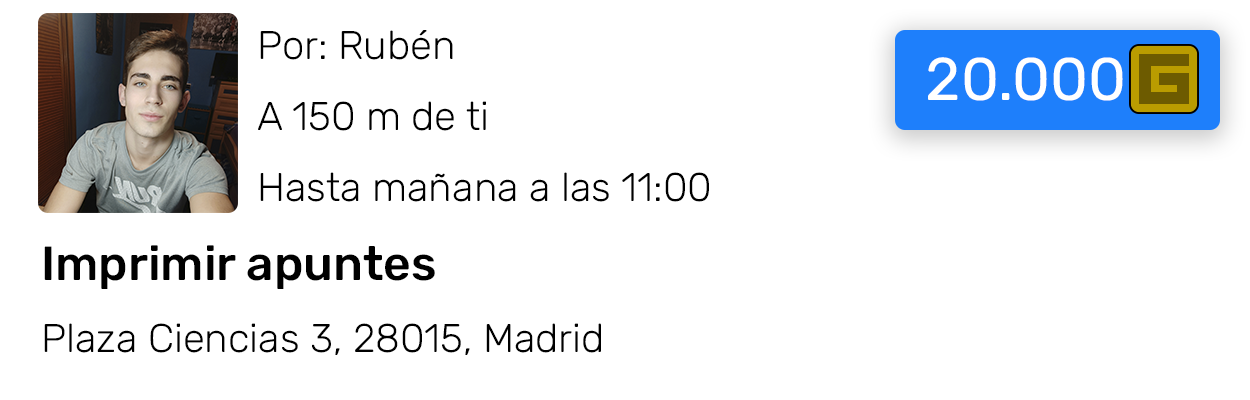
<style>
.page{position:relative;width:1250px;height:400px;background:#ffffff}
.page>*{position:absolute;margin:0}
.t1{font:40px "Rubik-Light";color:#000000}
.t2{font:10px "Roboto-Regular";color:#000000}
.t3{font:48px "Rubik-Medium";color:#000000}
.t4{font:60px "Rubik-Regular";color:#ffffff}
</style>
<div class="page">
<p class="t1" style="left:44px;top:30px;width:665px;height:325px"><span class="t2">      </span>Por: Rubén<br><br><br>      A 150 m de ti<br><br><br>      Hasta mañana a las 11:00<br><br><br><span class="t3">Imprimir apuntes<br><br></span>Plaza Ciencias 3, 28015, Madrid</p>
<p class="t4" style="left:928px;top:57px;width:195px;height:44px">20.000</p>
</div>
